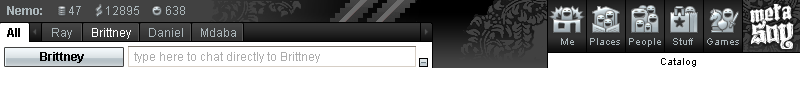
<style>
.page{position:relative;width:800px;height:100px;background:#ffffff}
.page>*{position:absolute;margin:0}
.t1{font:12px "Arial-BoldMT";color:#aab5b9}
.t2{font:12px "ArialMT";color:#aab5b9}
.t3{font:12px "Arial-BoldMT";color:#010100}
.t4{font:12px "ArialMT";color:#ffffff}
.t5{font:10px "ArialMT";color:#aab5b9}
.t6{font:12px "Arial-BoldMT";color:#000000}
.t7{font:12px "ArialMT";color:#adadad}
.t8{font:10px "ArialMT";color:#000000}
</style>
<div class="page">
<p class="t1" style="left:7px;top:6px;width:35px;height:9px">Nemo:</p>
<p class="t2" style="left:69px;top:6px;width:12px;height:9px">47</p>
<p class="t2" style="left:106px;top:6px;width:33px;height:9px">12895</p>
<p class="t2" style="left:166px;top:6px;width:19px;height:9px">638</p>
<p class="t3" style="left:7px;top:28px;width:13px;height:9px">All</p>
<p class="t2" style="left:52px;top:28px;width:20px;height:11px">Ray</p>
<p class="t4" style="left:92px;top:28px;width:39px;height:11px">Brittney</p>
<p class="t2" style="left:149px;top:28px;width:34px;height:9px">Daniel</p>
<p class="t2" style="left:201px;top:28px;width:35px;height:9px">Mdaba</p>
<p class="t5" style="left:561px;top:38px;width:13px;height:7px">Me</p>
<p class="t5" style="left:590px;top:38px;width:30px;height:7px">Places</p>
<p class="t5" style="left:629px;top:38px;width:32px;height:9px">People</p>
<p class="t5" style="left:673px;top:38px;width:20px;height:7px">Stuff</p>
<p class="t5" style="left:707px;top:38px;width:32px;height:7px">Games</p>
<p class="t6" style="left:40px;top:52px;width:44px;height:11px">Brittney</p>
<p class="t7" style="left:134px;top:52px;width:186px;height:11px">type here to chat directly to Brittney</p>
<p class="t8" style="left:661px;top:58px;width:35px;height:9px">Catalog</p>
</div>
